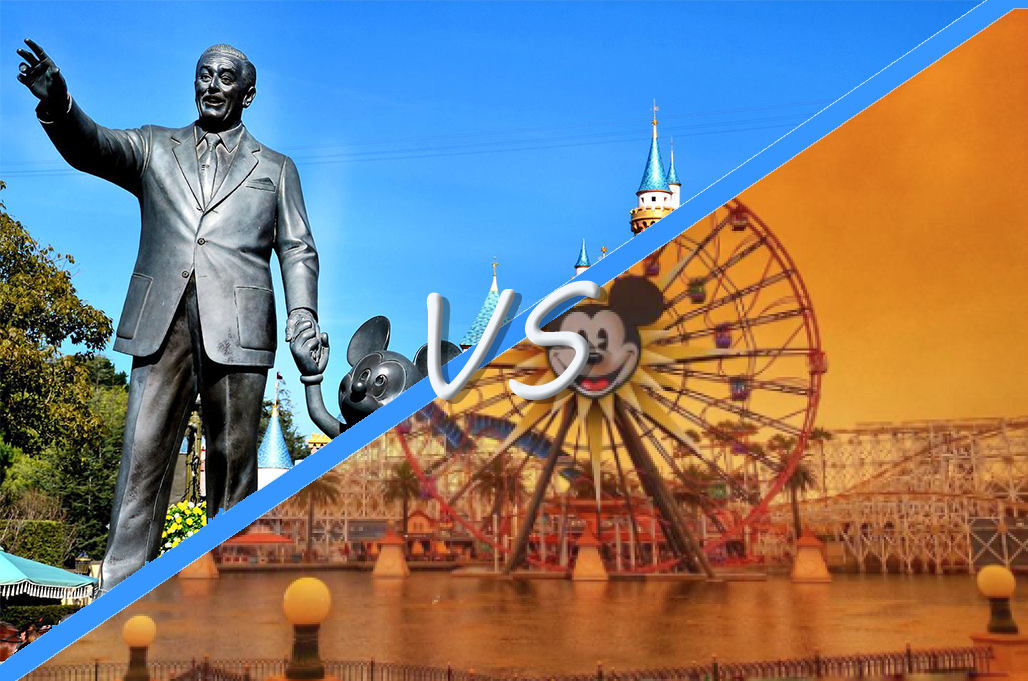
<style>
.page{position:relative;width:1028px;height:681px}
.page>*{position:absolute;margin:0}
.t1{font:150px "MVBoli";color:#eef3f8}
</style>
<div class="page">
<p class="t1" style="left:426px;top:280px;width:175px;height:120px">VS</p>
</div>
